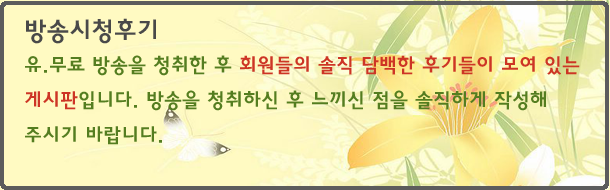
<style>
.page{position:relative;width:610px;height:190px;background:#fffac2}
.page>*{position:absolute;margin:0}
.t1{font:25px "HaanYGodic24";color:#494949}
.t2{font:20px "HaanYGodic24";color:#547d20}
.t3{font:20px "HaanYGodic24";color:#cd3525}
</style>
<div class="page">
<p class="t1" style="left:26px;top:18px;width:130px;height:26px">방송시청후기</p>
<p class="t2" style="left:25px;top:55px;width:555px;height:90px">유.무료 방송을 청취한 후 <span class="t3">회원들의 솔직 담백한 후기들이 모여 있는 게시판</span>입니다. 방송을 청취하신 후 느끼신 점을 솔직하게 작성해 주시기 바랍니다.</p>
</div>
